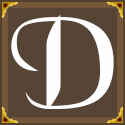
<style>
.page{position:relative;width:125px;height:125px;background:#564534}
.page>*{position:absolute;margin:0}
.t1{font:107.9px "BlackChancery";color:#fefefe}
</style>
<div class="page">
<p class="t1" style="left:11px;top:15px;width:103px;height:94px">D</p>
</div>
